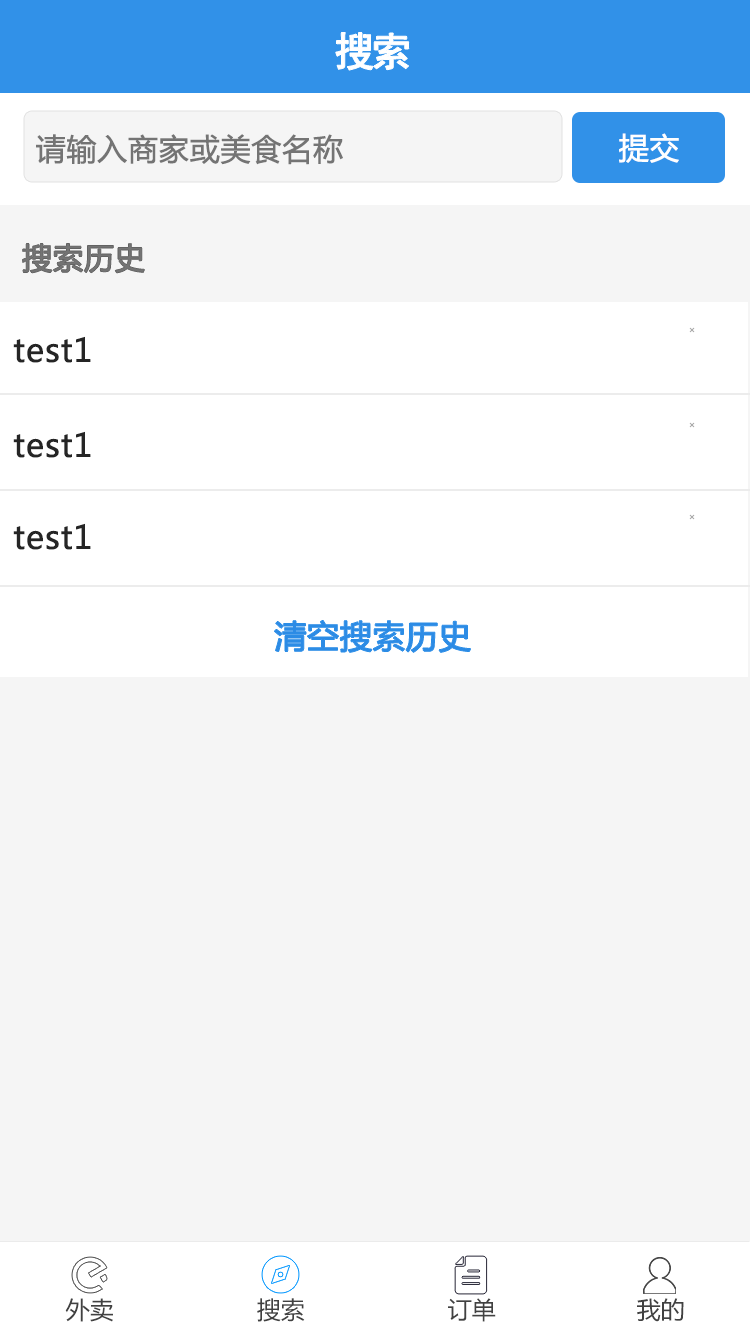
<style>
.page{position:relative;width:750px;height:1334px;background:#f5f5f5}
.page>*{position:absolute;margin:0}
.t1{font:40px "SimHei";letter-spacing:-0.1em;color:#ffffff;font-weight:bold}
.t2{font:30px "MicrosoftYaHei";color:#747474;font-weight:bold}
.t3{font:30px "MicrosoftYaHei";color:#ffffff;font-weight:bold}
.t4{font:32px "MicrosoftYaHei";color:#252525;font-weight:bold}
.t5{font:32px "MicrosoftYaHei";color:#2c8be5;font-weight:bold}
.t6{font:24px "MicrosoftYaHei";color:#414141}
</style>
<div class="page">
<p class="t1" style="left:335px;top:32px;width:74px;height:38px">搜索</p>
<p class="t2" style="left:36px;top:134px;width:307px;height:31px">请输入商家或美食名称</p>
<p class="t3" style="left:619px;top:133px;width:60px;height:30px">提交</p>
<p class="t2" style="left:22px;top:243px;width:123px;height:30px">搜索历史</p>
<p class="t4" style="left:13px;top:336px;width:78px;height:27px">test1</p>
<p class="t4" style="left:13px;top:431px;width:78px;height:27px">test1</p>
<p class="t4" style="left:13px;top:523px;width:78px;height:27px">test1</p>
<p class="t5" style="left:274px;top:620px;width:197px;height:33px">清空搜索历史</p>
<p class="t6" style="left:65px;top:1298px;width:48px;height:24px">外卖</p>
<p class="t6" style="left:257px;top:1298px;width:48px;height:24px">搜索</p>
<p class="t6" style="left:448px;top:1298px;width:48px;height:24px">订单</p>
<p class="t6" style="left:637px;top:1298px;width:47px;height:24px">我的</p>
</div>
